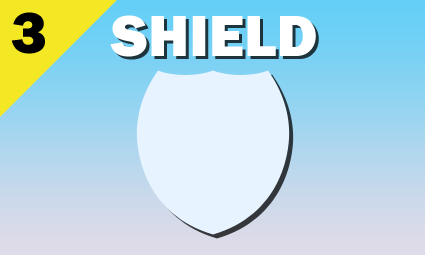
<style>
.page{position:relative;width:425px;height:255px}
.page>*{position:absolute;margin:0}
.t1{font:60px "FranklinGothic-Heavy";color:#000000}
.t2{font:60px "FranklinGothic-Heavy";color:#ffffff}
</style>
<div class="page">
<p class="t1" style="left:11px;top:12px;width:34px;height:42px">3</p>
<p class="t2" style="left:110px;top:15px;width:206px;height:42px">SHIELD</p>
</div>
